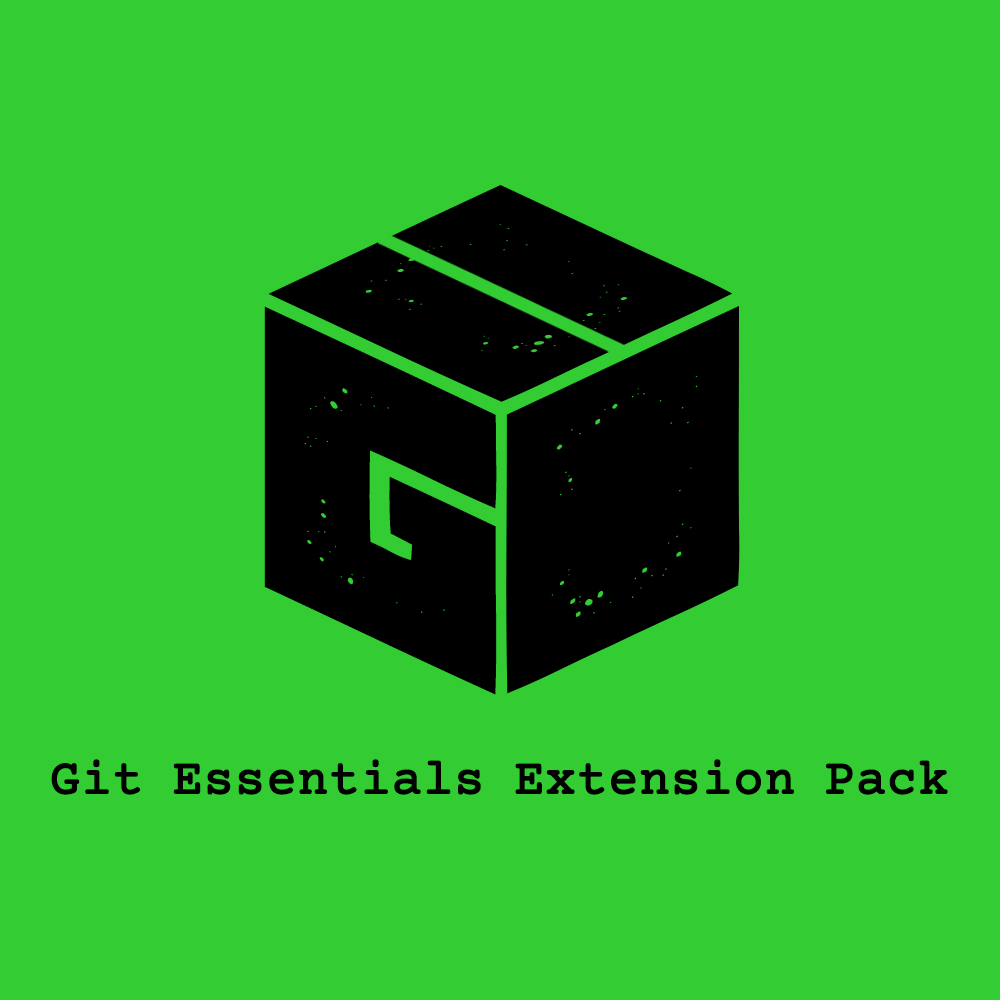
<style>
.page{position:relative;width:1000px;height:1000px;background:#33cc33}
.page>*{position:absolute;margin:0}
.t1{font:402.9px "ManiacGrunged-Regular";color:#000000;scale:1.24 1}
.t2{font:50px "CourierPrime-Regular";color:#000000;font-weight:bold}
</style>
<div class="page">
<p class="t1" style="left:264px;top:306px;width:233px;height:389px;rotate:25deg">G</p>
<p class="t2" style="left:51px;top:759px;width:897px;height:36px">Git Essentials Extension Pack</p>
</div>
